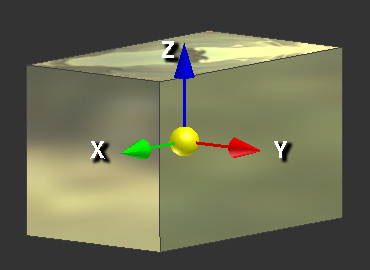
<style>
.page{position:relative;width:370px;height:270px;background:#333333}
.page>*{position:absolute;margin:0}
.t1{font:22.1px "Helios-Bold";letter-spacing:-0.08em;color:#feffff;text-transform:uppercase}
</style>
<div class="page">
<p class="t1" style="left:162px;top:41px;width:12px;height:17px">Z</p>
<p class="t1" style="left:90px;top:141px;width:15px;height:18px">X</p>
<p class="t1" style="left:274px;top:141px;width:13px;height:17px">Y</p>
</div>
